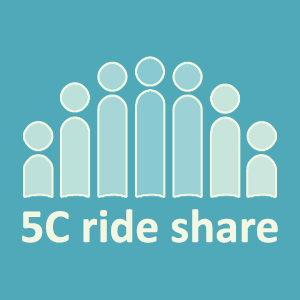
<style>
.page{position:relative;width:300px;height:300px;background:#4fa9b8}
.page>*{position:absolute;margin:0}
.t1{font:48.1px "Calibri-Bold";color:#f1f7e2}
</style>
<div class="page">
<p class="t1" style="left:22px;top:209px;width:256px;height:34px">5C ride share</p>
</div>
